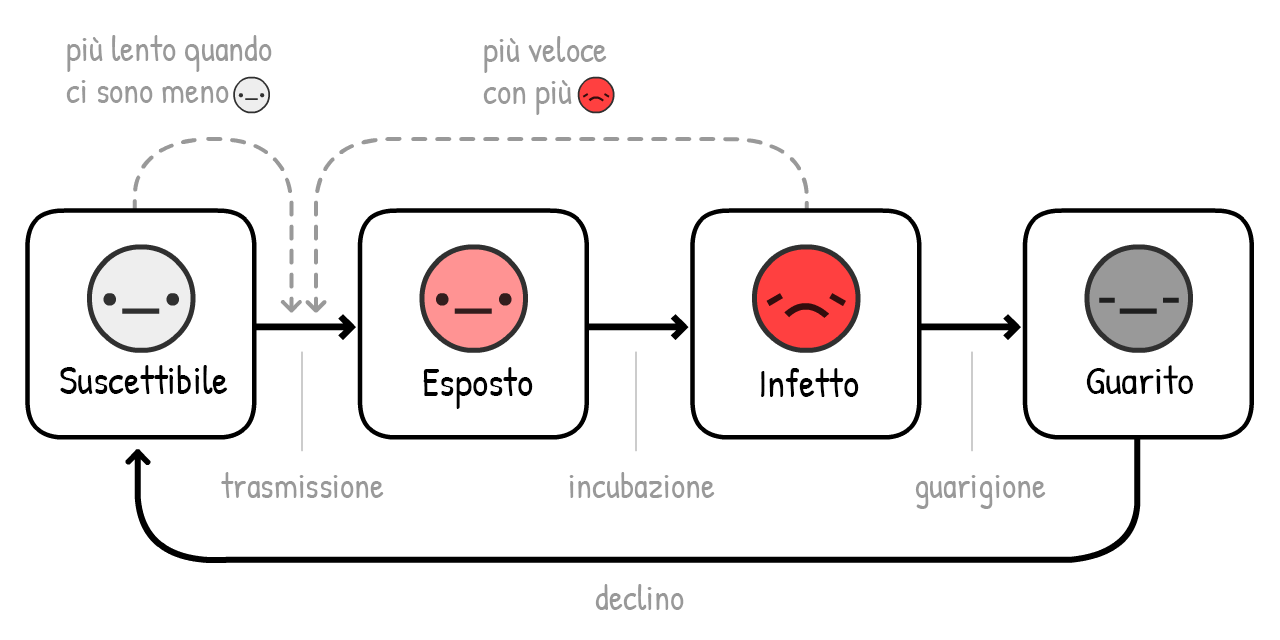
<style>
.page{position:relative;width:1280px;height:640px;background:#ffffff}
.page>*{position:absolute;margin:0}
.t1{font:35px "PatrickHand-Regular";color:#999999}
.t2{font:40px "PatrickHand-Regular";color:#000000}
.t3{font:39.2px "PatrickHand-Regular";color:#000000;scale:1.06 1}
</style>
<div class="page">
<p class="t1" style="left:66px;top:35px;width:206px;height:68px">più lento quando<br>ci sono meno</p>
<p class="t1" style="left:483px;top:36px;width:124px;height:79px">più veloce<br>con più</p>
<p class="t2" style="left:60px;top:365px;width:168px;height:29px">Suscettibile</p>
<p class="t3" style="left:1086px;top:365px;width:107px;height:29px">Guarito</p>
<p class="t2" style="left:423px;top:367px;width:110px;height:42px">Esposto</p>
<p class="t2" style="left:761px;top:368px;width:98px;height:29px">Infetto</p>
<p class="t1" style="left:221px;top:472px;width:163px;height:26px">trasmissione</p>
<p class="t1" style="left:569px;top:472px;width:146px;height:26px">incubazione</p>
<p class="t1" style="left:915px;top:475px;width:131px;height:34px">guarigione</p>
<p class="t1" style="left:595px;top:584px;width:89px;height:26px">declino</p>
</div>
